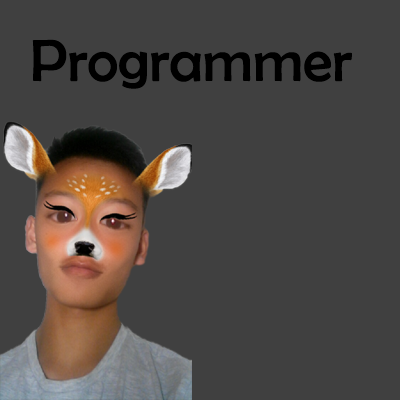
<style>
.page{position:relative;width:400px;height:400px;background:#404040}
.page>*{position:absolute;margin:0}
.t1{font:60px "BerlinSansFB-Reg";color:#000000}
</style>
<div class="page">
<p class="t1" style="left:32px;top:39px;width:320px;height:50px">Programmer</p>
</div>
